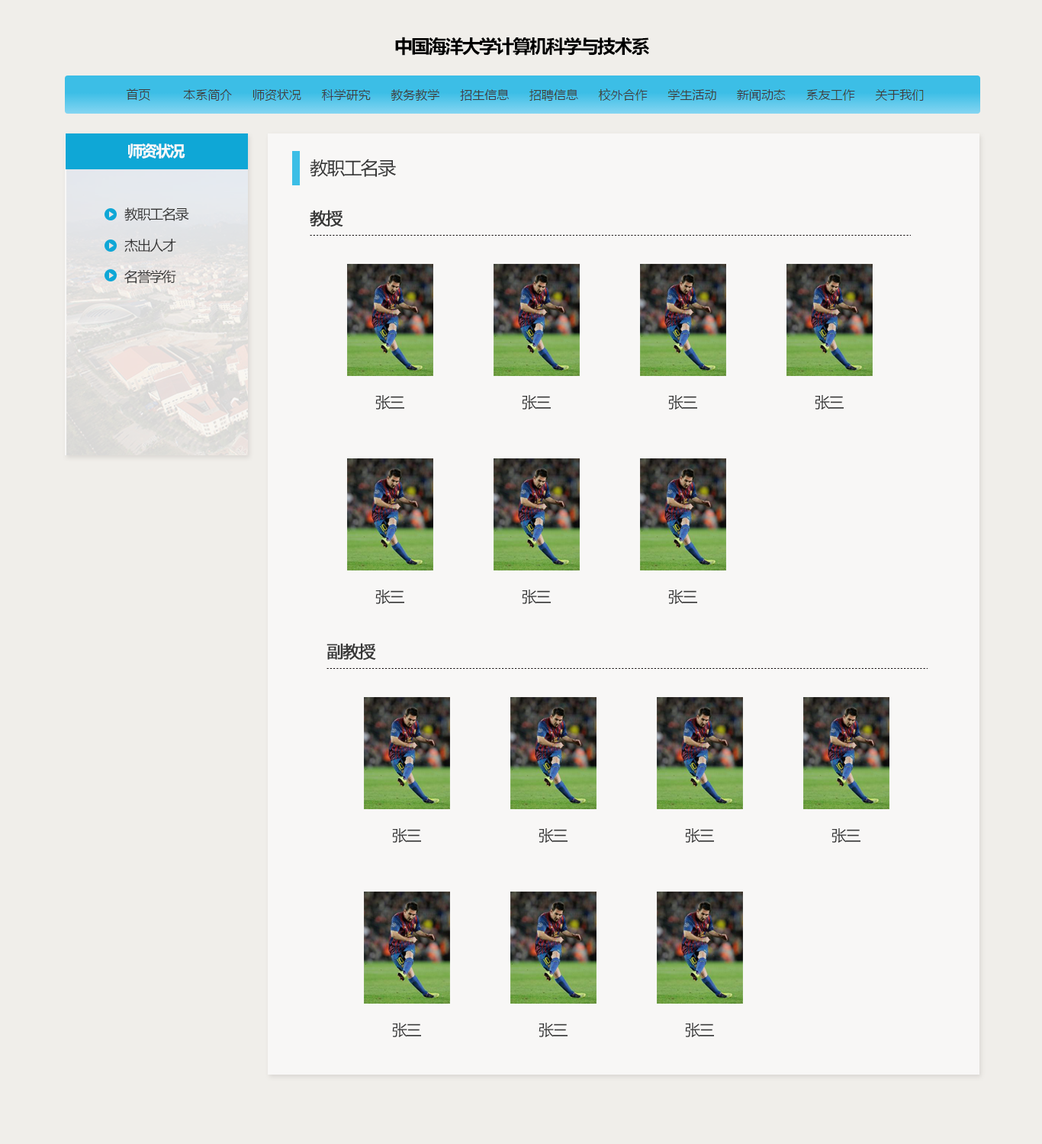
<style>
.page{position:relative;width:1042px;height:1144px;background:#f8f7f6}
.page>*{position:absolute;margin:0}
.t1{font:18.3px "MicrosoftYaHei-Bold";letter-spacing:-0.076em;color:#000000}
.t2{font:15.3px "MicrosoftYaHei-Bold";letter-spacing:-0.076em;color:#f9f9f9}
.t3{font:18.3px "MicrosoftYaHei";letter-spacing:-0.076em;color:#383838}
.t4{font:13.7px "MicrosoftYaHei";letter-spacing:-0.076em;color:#383838}
.t5{font:16.8px "MicrosoftYaHei";letter-spacing:-0.076em;color:#383838;font-weight:bold}
.t6{font:15.3px "MicrosoftYaHei";letter-spacing:-0.076em;color:#383838}
</style>
<div class="page">
<p class="t1" style="left:395px;top:37px;width:254px;height:19px">中国海洋大学计算机科学与技术系</p>
<p class="t2" style="left:128px;top:143px;width:57px;height:16px">师资状况</p>
<p class="t3" style="left:310px;top:159px;width:86px;height:18px">教职工名录</p>
<p class="t4" style="left:124px;top:207px;width:65px;height:14px">教职工名录</p>
<p class="t5" style="left:310px;top:210px;width:33px;height:17px">教授</p>
<p class="t4" style="left:124px;top:239px;width:52px;height:14px">杰出人才</p>
<p class="t4" style="left:124px;top:269px;width:52px;height:15px">名誉学衔</p>
<p class="t6" style="left:375px;top:395px;width:29px;height:15px">张三</p>
<p class="t6" style="left:522px;top:395px;width:29px;height:15px">张三</p>
<p class="t6" style="left:668px;top:395px;width:29px;height:15px">张三</p>
<p class="t6" style="left:815px;top:395px;width:29px;height:15px">张三</p>
<p class="t6" style="left:375px;top:590px;width:29px;height:14px">张三</p>
<p class="t6" style="left:522px;top:590px;width:29px;height:14px">张三</p>
<p class="t6" style="left:668px;top:590px;width:29px;height:14px">张三</p>
<p class="t5" style="left:327px;top:643px;width:49px;height:18px">副教授</p>
<p class="t6" style="left:392px;top:828px;width:29px;height:15px">张三</p>
<p class="t6" style="left:539px;top:828px;width:29px;height:15px">张三</p>
<p class="t6" style="left:685px;top:828px;width:29px;height:15px">张三</p>
<p class="t6" style="left:832px;top:828px;width:29px;height:15px">张三</p>
<p class="t6" style="left:392px;top:1023px;width:29px;height:14px">张三</p>
<p class="t6" style="left:539px;top:1023px;width:29px;height:14px">张三</p>
<p class="t6" style="left:685px;top:1023px;width:29px;height:14px">张三</p>
</div>
